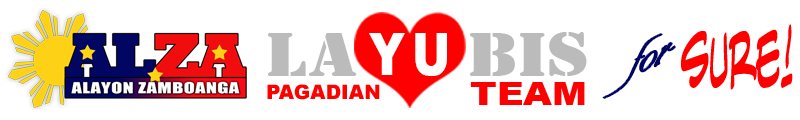
<style>
.page{position:relative;width:800px;height:120px;background:#ffffff}
.page>*{position:absolute;margin:0}
.t1{font:77.8px "AntiHrdina";color:#ff0000;scale:0.5 1}
.t2{font:60.5px "StencilBT-Regular";color:#bbbbbb;scale:1.18 1}
.t3{font:58.8px "Arial-Black";color:#ffffff;scale:0.78 1}
.t4{font:35.7px "AlexeiCopperplateITC-Normal";color:#010662;scale:2.53 1}
.t5{font:20px "Arial-Black";color:#ff0000}
.t6{font:32.3px "Arial-Black";color:#ff0000;scale:1.14 1}
</style>
<div class="page">
<p class="t1" style="left:681px;top:24px;width:112px;height:66px">SURE!</p>
<p class="t2" style="left:268px;top:32px;width:319px;height:44px">LA     BIS</p>
<p class="t3" style="left:369px;top:33px;width:78px;height:43px">Y  U</p>
<p class="t4" style="left:603px;top:34px;width:72px;height:64px;rotate:-23deg">for</p>
<p class="t5" style="left:267px;top:84px;width:113px;height:16px">PAGADIAN</p>
<p class="t6" style="left:470px;top:82px;width:115px;height:23px">TEAM</p>
</div>
